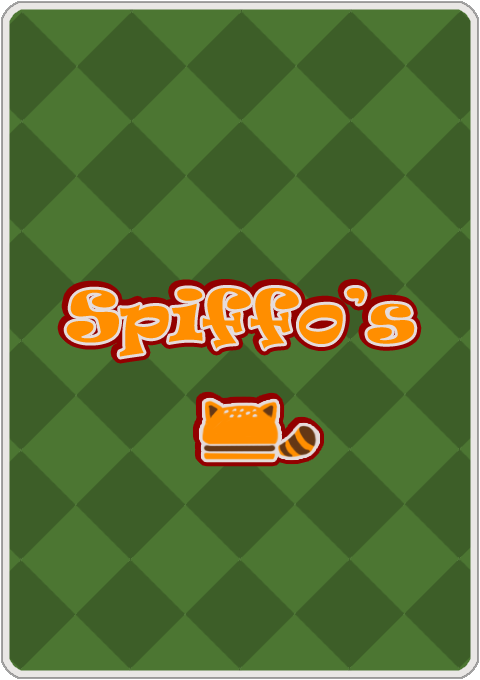
<style>
.page{position:relative;width:480px;height:680px;background:#3d5e28}
.page>*{position:absolute;margin:0}
.t1{font:65px "Ravie";color:#ff8e00}
</style>
<div class="page">
<p class="t1" style="left:66px;top:288px;width:349px;height:69px">Spiffo’s</p>
</div>
